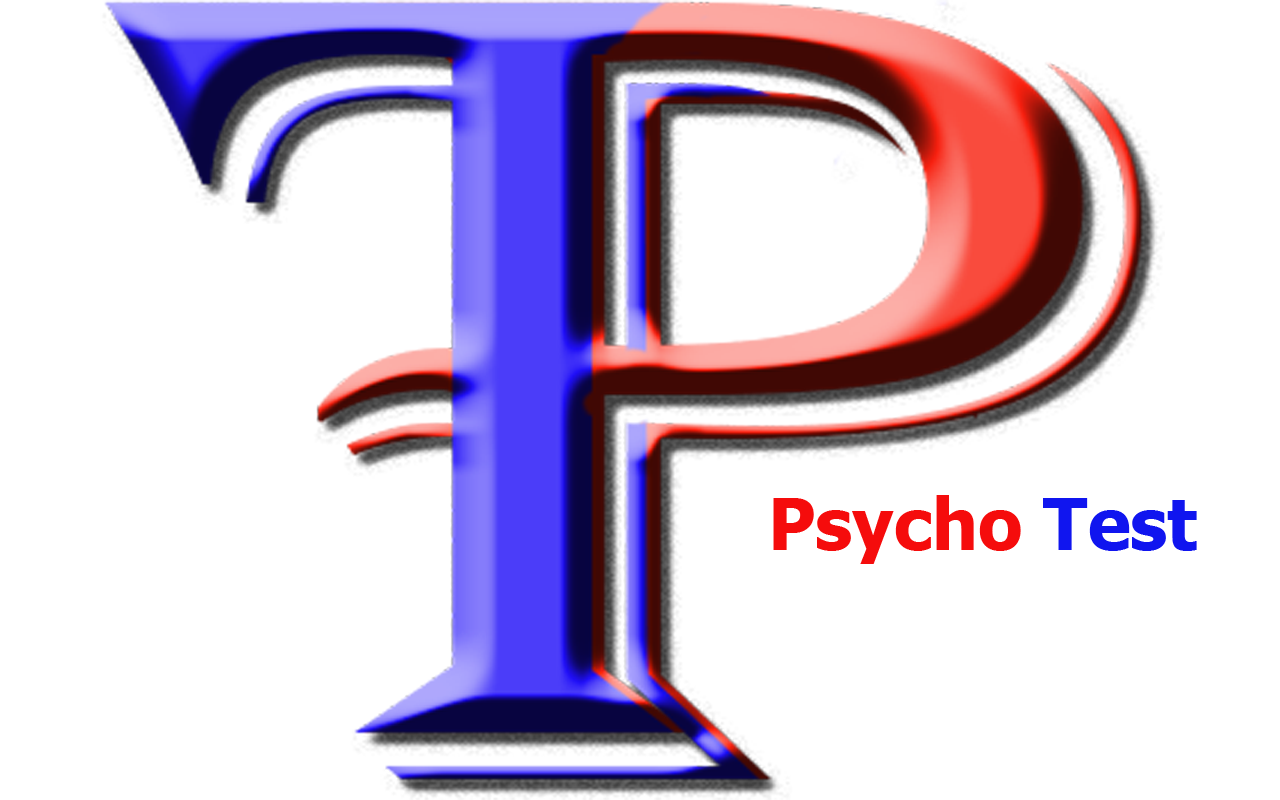
<style>
.page{position:relative;width:1280px;height:800px;background:#ffffff}
.page>*{position:absolute;margin:0}
.t1{font:72px "Tahoma-Bold";color:#f50c0c}
.t2{font:72px "Tahoma-Bold";color:#1015ef}
</style>
<div class="page">
<p class="t1" style="left:773px;top:495px;width:424px;height:69px">Psycho <span class="t2">Test</span></p>
</div>
